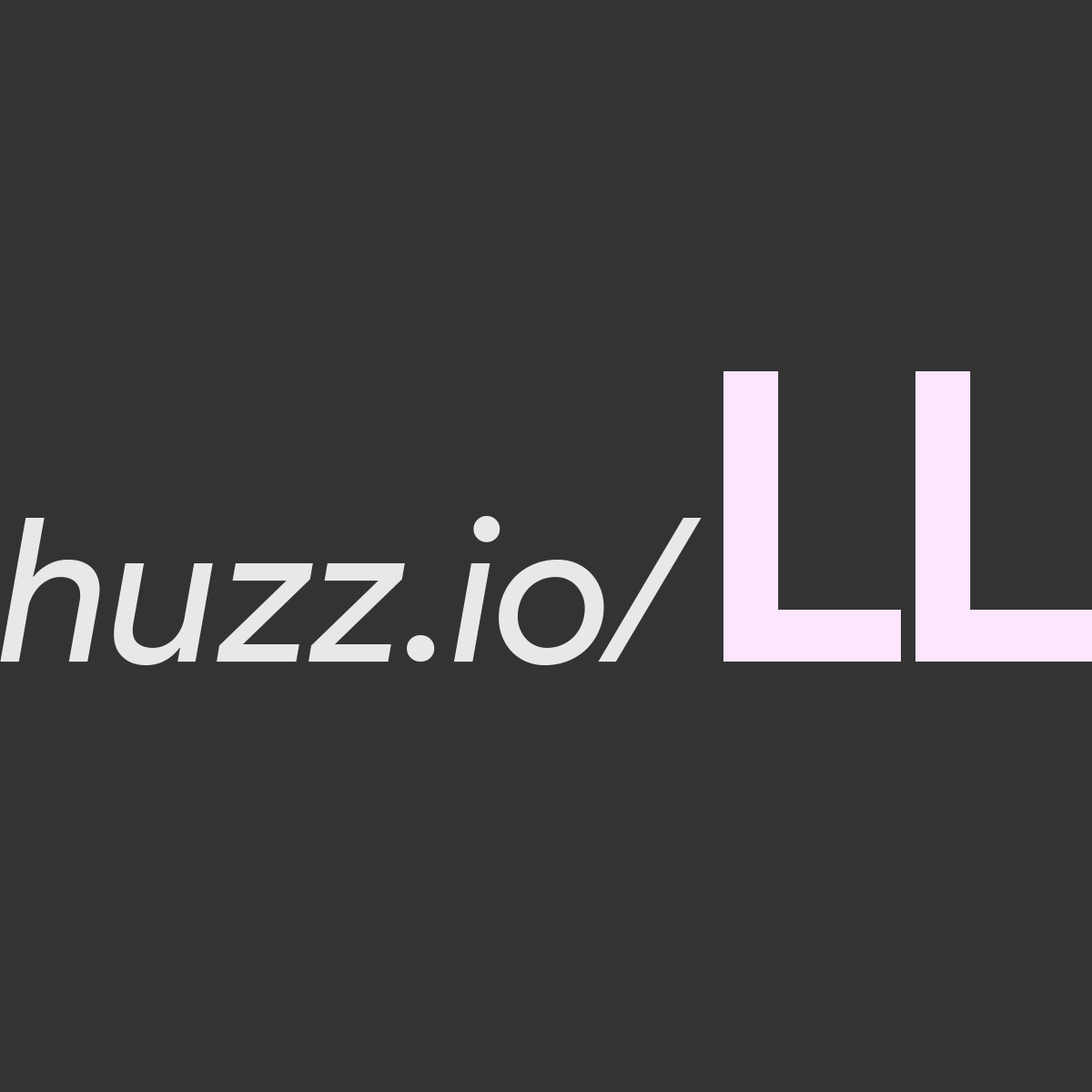
<style>
.page{position:relative;width:1092px;height:1092px;background:#333333}
.page>*{position:absolute;margin:0}
.t1{font:201.2px "ProductSans-Italic";color:#e8e8e8}
.t2{font:404.7px "ProductSans-Bold";letter-spacing:-0.06em;color:#ffe6ff}
</style>
<div class="page">
<p class="t1" style="left:0px;top:371px;width:1093px;height:294px">huzz.io/<span class="t2">LL</span></p>
</div>
